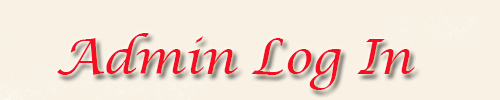
<style>
.page{position:relative;width:500px;height:100px;background:#f8f1e4}
.page>*{position:absolute;margin:0}
.t1{font:48px "LucidaCalligraphy-Italic";color:#f30e24}
</style>
<div class="page">
<p class="t1" style="left:57px;top:33px;width:358px;height:57px">Admin Log In</p>
</div>
